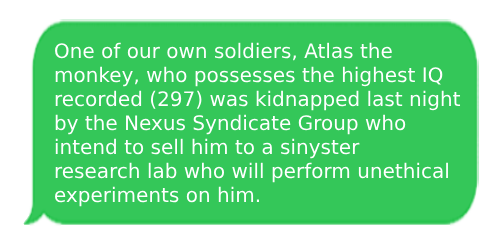
<style>
.page{position:relative;width:500px;height:250px;background:#34c759}
.page>*{position:absolute;margin:0}
.t1{font:20px "HelveticaNeue-MediumCond";color:#ffffff}
</style>
<div class="page">
<p class="t1" style="left:55px;top:42px;width:406px;height:165px">One of our own soldiers, Atlas the <br>monkey, who possesses the highest IQ <br>recorded (297) was kidnapped last night <br>by the Nexus Syndicate Group who<br>intend to sell him to a sinyster <br>research lab who will perform unethical <br>experiments on him.</p>
</div>
